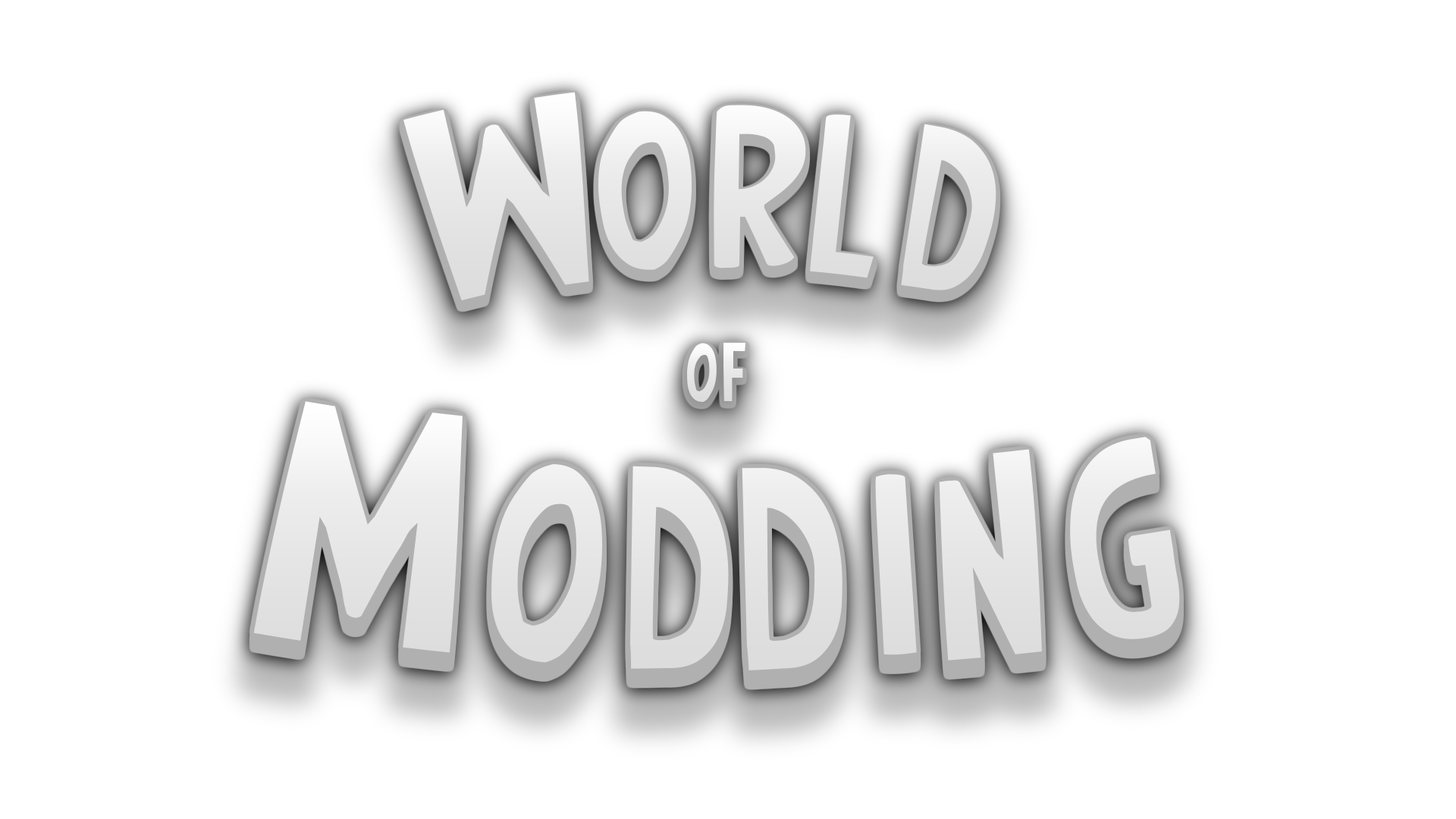
<style>
.page{position:relative;width:1456px;height:819px;background:#ffffff}
.page>*{position:absolute;margin:0}
.t1{font:317.8px "Earth's-Mightiest";color:#e9e9e9}
.t2{font:117.4px "Earth's-Mightiest";color:#e9e9e9}
.t3{font:397.3px "Earth's-Mightiest";color:#e6e6e6}
</style>
<div class="page">
<p class="t1" style="left:403px;top:92px;width:593px;height:209px">World</p>
<p class="t2" style="left:687px;top:343px;width:59px;height:59px">of</p>
<p class="t3" style="left:253px;top:401px;width:927px;height:269px">Modding</p>
</div>
